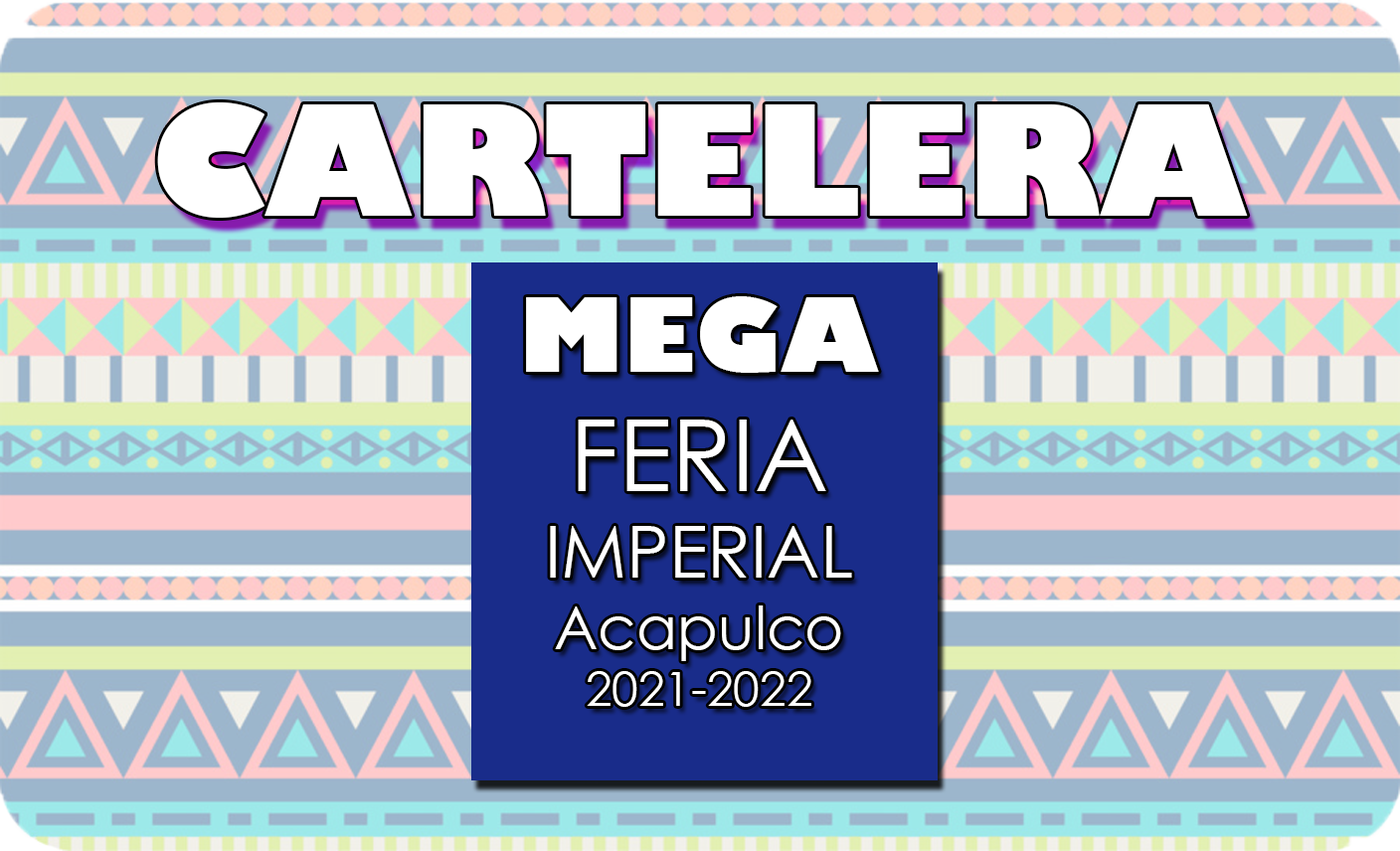
<style>
.page{position:relative;width:1400px;height:851px}
.page>*{position:absolute;margin:0}
.t1{font:149.2px "GillSans-UltraBold";color:#ffffff}
.t2{font:47.7px "CenturyGothic";color:#ffffff}
.t3{font:99.5px "GillSans-UltraBold";color:#ffffff}
.t4{font:99.5px "CenturyGothic";color:#ffffff}
.t5{font:71.6px "CenturyGothic";color:#ffffff}
.t6{font:59.7px "CenturyGothic";color:#ffffff}
</style>
<div class="page">
<p class="t1" style="left:157px;top:102px;width:1091px;height:116px">CARTELERA</p>
<p class="t2" style="left:526px;top:296px;width:353px;height:411px;text-align:center"><span class="t3">MEGA<br></span><span class="t4">FERIA <br></span><span class="t5">IMPERIAL<br></span><span class="t6">Acapulco <br></span>2021-2022</p>
</div>
